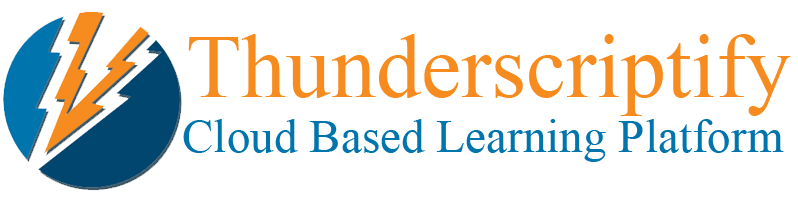
<style>
.page{position:relative;width:798px;height:208px;background:#ffffff}
.page>*{position:absolute;margin:0}
.t1{font:90px "TimesNewRomanPSMT";color:#f68b1f}
.t2{font:47.1px "TimesNewRomanPSMT";color:#0074ad}
</style>
<div class="page">
<p class="t1" style="left:188px;top:34px;width:603px;height:82px">Thunderscriptify</p>
<p class="t2" style="left:183px;top:119px;width:601px;height:43px">Cloud Based Learning Platform</p>
</div>
